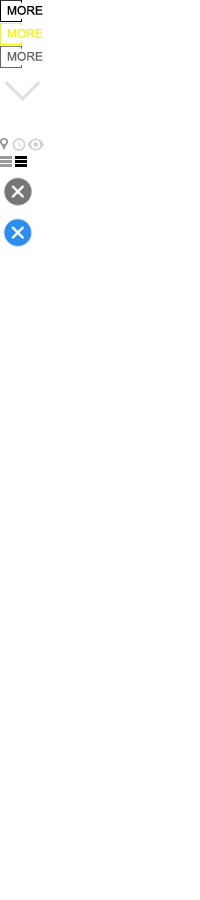
<style>
.page{position:relative;width:200px;height:900px;background:#ffffff}
.page>*{position:absolute;margin:0}
.t1{font:12px "ArialMT";color:#000000;text-transform:uppercase}
.t2{font:12px "ArialMT";color:#f6f602;text-transform:uppercase}
.t3{font:12px "ArialMT";color:#666666;text-transform:uppercase}
.t4{font:47.8px "SimSun";color:#e0e0e0;text-transform:uppercase;font-weight:bold}
</style>
<div class="page">
<p class="t1" style="left:7px;top:5px;width:36px;height:10px">more</p>
<p class="t2" style="left:7px;top:28px;width:36px;height:10px">more</p>
<p class="t3" style="left:7px;top:51px;width:36px;height:10px">more</p>
<p class="t4" style="left:5px;top:81px;width:35px;height:20px;rotate:90deg">&gt;</p>
</div>
